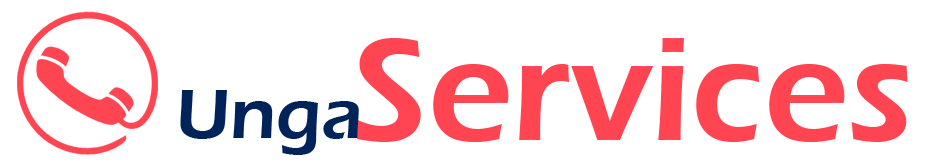
<style>
.page{position:relative;width:933px;height:164px;background:#ffffff}
.page>*{position:absolute;margin:0}
.t1{font:150px "ErasITC-Demi";color:#ff4452}
.t2{font:72px "ErasITC-Demi";color:#002359}
</style>
<div class="page">
<p class="t1" style="left:355px;top:38px;width:553px;height:104px">Services</p>
<p class="t2" style="left:180px;top:90px;width:179px;height:65px">Unga</p>
</div>
